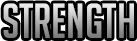
<style>
.page{position:relative;width:137px;height:41px;background:#000000}
.page>*{position:absolute;margin:0}
.t1{font:48px "BigNoodleTitling"}
</style>
<div class="page">
<p class="t1" style="left:3px;top:3px;width:131px;height:35px">STRENGTH</p>
</div>
